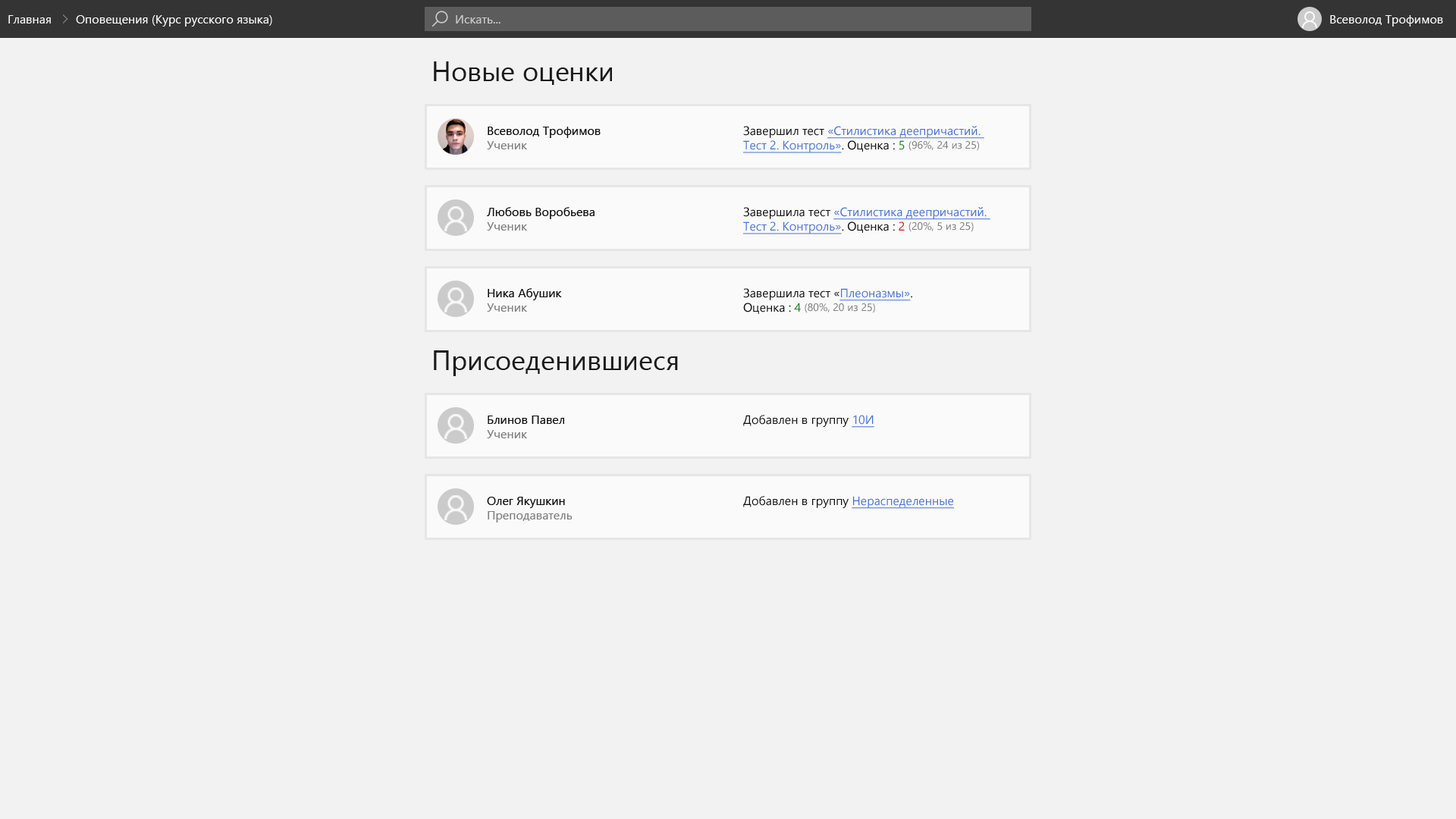
<style>
.page{position:relative;width:1456px;height:819px;background:#f2f2f2}
.page>*{position:absolute;margin:0}
.t1{font:12.1px "SegoeUI";color:#fafafa}
.t2{font:12.1px "SegoeUI";color:#cbcbcb}
.t3{font:27.3px "SegoeUI";color:#1b1b1b}
.t4{font:12.1px "SegoeUI";color:#4670dc;text-decoration:underline}
.t5{font:12.1px "SegoeUI";color:#0f0f0f}
.t6{font:12.1px "SegoeUI";color:#1a801a}
.t7{font:10.6px "SegoeUI";color:#808080}
.t8{font:12.1px "SegoeUI";color:#808080}
.t9{font:12.1px "SegoeUI";color:#e20e0e}
</style>
<div class="page">
<p class="t1" style="left:8px;top:15px;width:43px;height:9px">Главная</p>
<p class="t1" style="left:76px;top:15px;width:196px;height:12px">Оповещения (Курс русского языка)</p>
<p class="t2" style="left:456px;top:15px;width:44px;height:9px">Искать...</p>
<p class="t1" style="left:1330px;top:15px;width:113px;height:12px">Всеволод Трофимов</p>
<p class="t3" style="left:434px;top:61px;width:178px;height:24px">Новые оценки</p>
<p class="t4" style="left:743px;top:126px;width:241px;height:27px"><span class="t5">Завершил тест </span>«Стилистика деепричастий. <br>Тест 2. Контроль»<span class="t5">. Оценка : </span><span class="t6">5 </span><span class="t7">(96%, 24 из 25)</span></p>
<p class="t5" style="left:487px;top:127px;width:114px;height:22px">Всеволод Трофимов<br><span class="t8">Ученик</span></p>
<p class="t5" style="left:487px;top:207px;width:108px;height:24px">Любовь Воробьева<br><span class="t8">Ученик</span></p>
<p class="t4" style="left:743px;top:207px;width:247px;height:27px"><span class="t5">Завершила тест </span>«Стилистика деепричастий. <br>Тест 2. Контроль»<span class="t5">. Оценка : </span><span class="t9">2 </span><span class="t7">(20%, 5 из 25)</span></p>
<p class="t5" style="left:487px;top:288px;width:75px;height:24px">Ника Абушик<br><span class="t8">Ученик</span></p>
<p class="t5" style="left:743px;top:288px;width:169px;height:26px">Завершила тест «<span class="t4">Плеоназмы»</span>.<br>Оценка : <span class="t6">4 </span><span class="t7">(80%, 20 из 25)</span></p>
<p class="t3" style="left:434px;top:350px;width:244px;height:26px">Присоеденившиеся</p>
<p class="t5" style="left:487px;top:416px;width:77px;height:22px">Блинов Павел<br><span class="t8">Ученик</span></p>
<p class="t5" style="left:743px;top:415px;width:131px;height:13px">Добавлен в группу <span class="t4">10И</span></p>
<p class="t8" style="left:487px;top:497px;width:86px;height:25px"><span class="t5">Олег Якушкин<br></span>Преподаватель</p>
<p class="t5" style="left:743px;top:496px;width:211px;height:13px">Добавлен в группу <span class="t4">Нераспеделенные</span></p>
</div>
